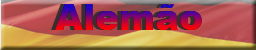
<style>
.page{position:relative;width:256px;height:50px}
.page>*{position:absolute;margin:0}
.t1{font:36px "Arial-Black"}
</style>
<div class="page">
<p class="t1" style="left:55px;top:4px;width:147px;height:26px">Alemão</p>
</div>
